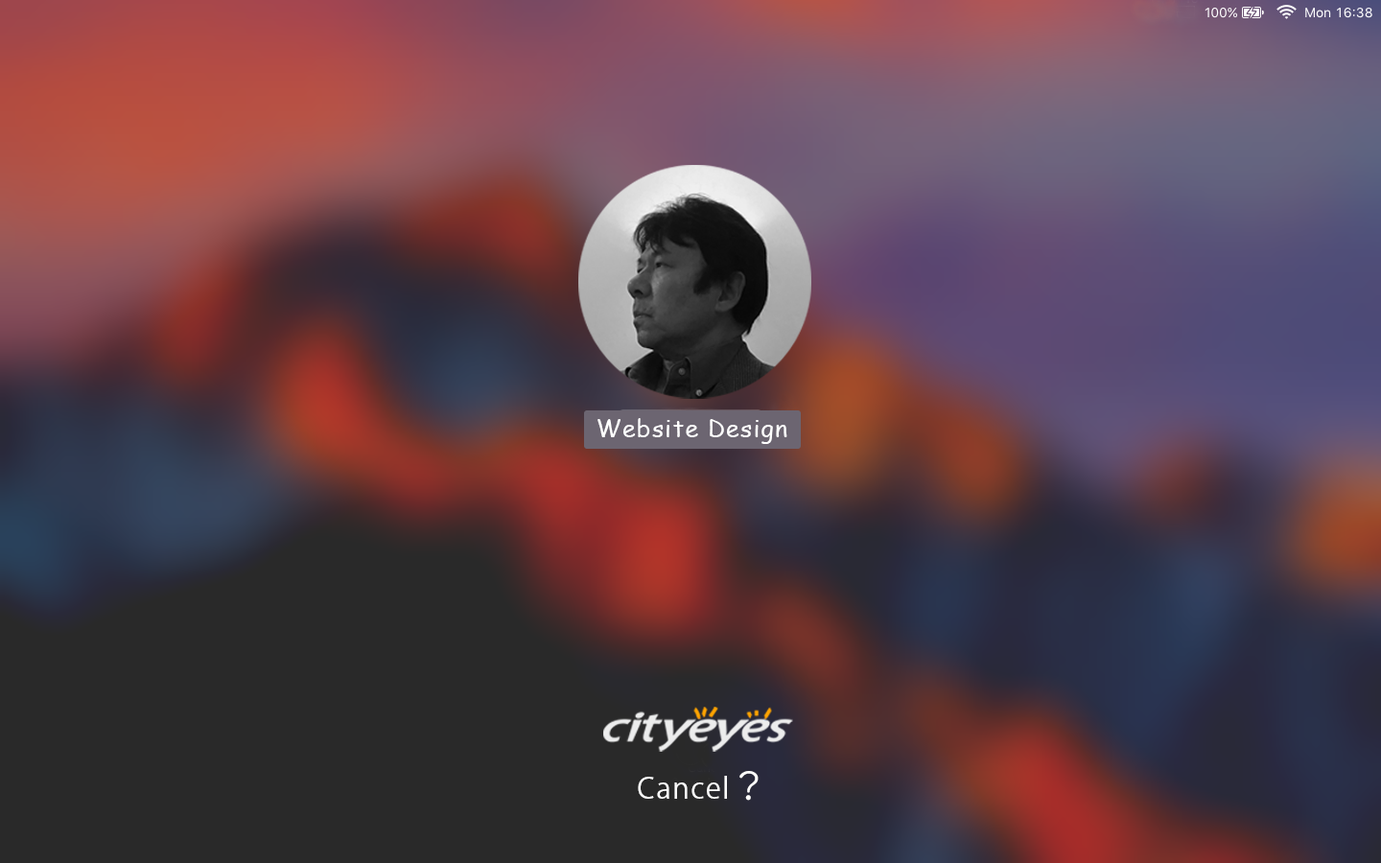
<style>
.page{position:relative;width:1381px;height:863px}
.page>*{position:absolute;margin:0}
.t1{font:24px "ComicSansMS";letter-spacing:0.05em;color:#ffffff}
.t2{font:34.9px "UDDigiKyokashoNK-R";letter-spacing:0.2em;color:#ffffff}
.t3{font:28.4px "KozGoPr6N-Regular";letter-spacing:0.05em;color:#ffffff}
</style>
<div class="page">
<p class="t1" style="left:598px;top:418px;width:190px;height:26px">Website Design</p>
<p class="t2" style="left:740px;top:771px;width:19px;height:30px">？</p>
<p class="t3" style="left:638px;top:776px;width:89px;height:23px">Cancel</p>
</div>
